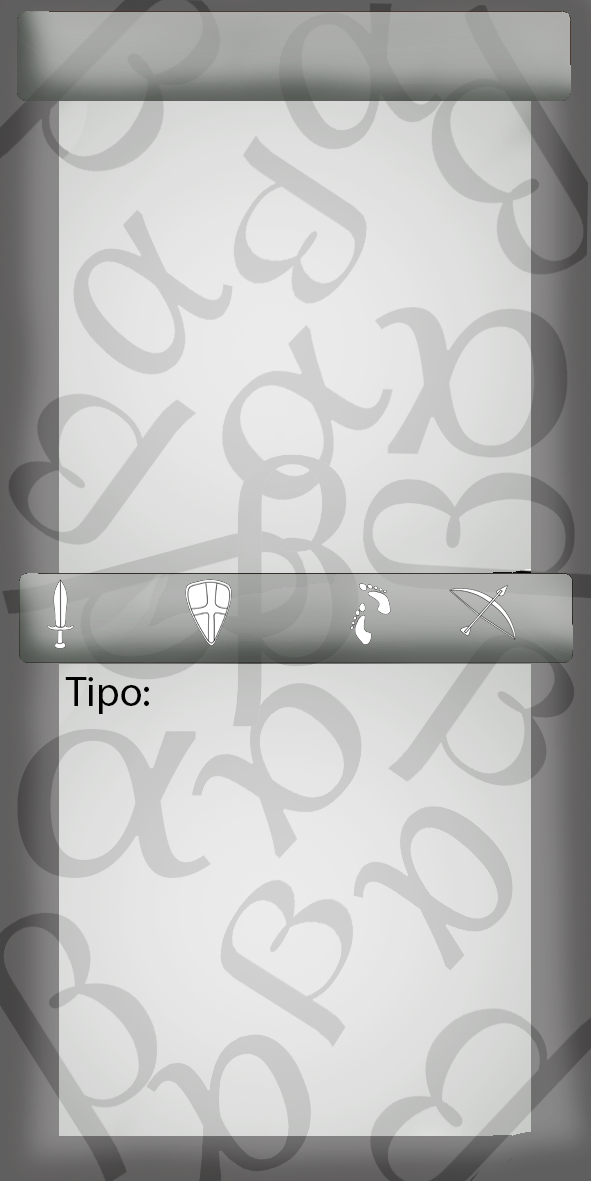
<style>
.page{position:relative;width:591px;height:1181px}
.page>*{position:absolute;margin:0}
.t1{font:41.7px "MyriadPro-Regular";color:#000000}
</style>
<div class="page">
<p class="t1" style="left:65px;top:677px;width:84px;height:37px">Tipo:</p>
</div>
